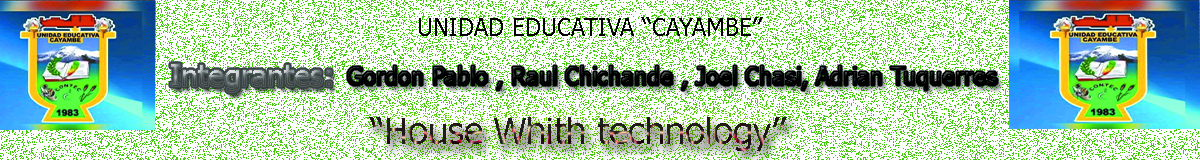
<style>
.page{position:relative;width:1200px;height:160px;background:#ffffff}
.page>*{position:absolute;margin:0}
.t1{font:24px "Tahoma";color:#000000}
.t2{font:36px "Tahoma"}
</style>
<div class="page">
<p class="t1" style="left:419px;top:17px;width:344px;height:19px">UNIDAD EDUCATIVA “CAYAMBE”</p>
<p class="t1" style="left:348px;top:66px;width:649px;height:24px">Gordon Pablo , Raul Chichande , Joel Chasi, Adrian Tuquerres</p>
<p class="t2" style="left:369px;top:117px;width:418px;height:34px">“House Whith technology”</p>
</div>
